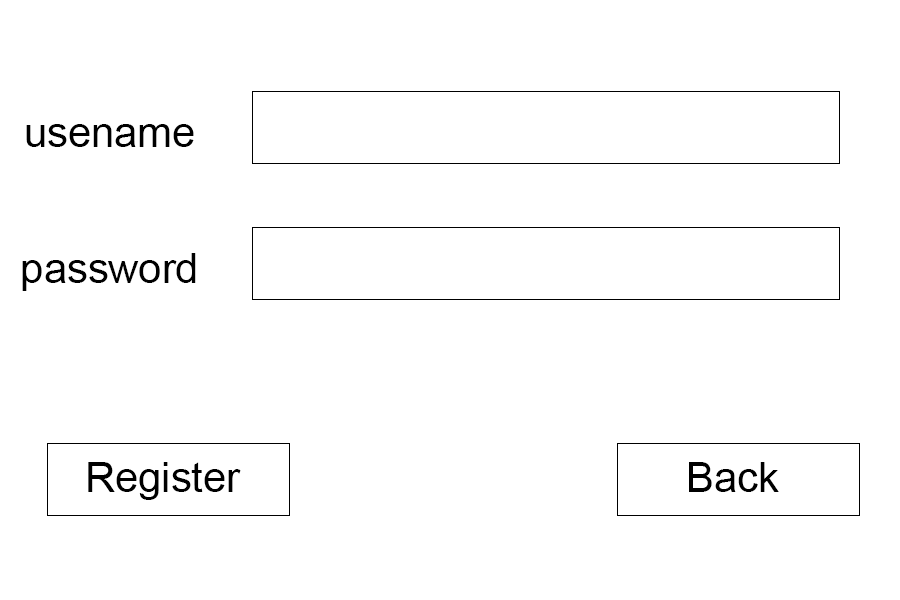
<style>
.page{position:relative;width:900px;height:600px;background:#ffffff}
.page>*{position:absolute;margin:0}
.t1{font:41.7px "ArialMT";color:#000000}
</style>
<div class="page">
<p class="t1" style="left:26px;top:124px;width:168px;height:23px">usename</p>
<p class="t1" style="left:22px;top:253px;width:174px;height:38px">password</p>
<p class="t1" style="left:88px;top:462px;width:153px;height:38px">Register</p>
<p class="t1" style="left:689px;top:462px;width:90px;height:30px">Back</p>
</div>
